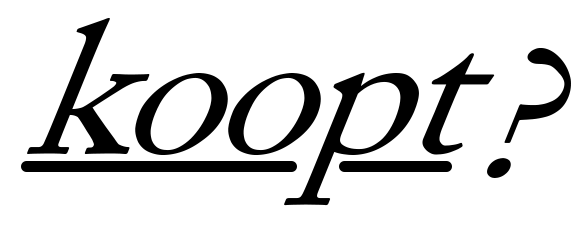
<style>
.page{position:relative;width:587px;height:228px;background:#ffffff}
.page>*{position:absolute;margin:0}
.t1{font:191px "ACaslon-Regular";letter-spacing:-0.04em;color:#000000;font-style:italic;scale:1.07 1}
</style>
<div class="page">
<p class="t1" style="left:27px;top:17px;width:468px;height:189px">koopt</p>
<p class="t1" style="left:487px;top:48px;width:84px;height:130px">?</p>
</div>
